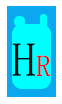
<style>
.page{position:relative;width:62px;height:104px;background:#00ffff}
.page>*{position:absolute;margin:0}
.t1{font:48px "SimSun";color:#090a09}
.t2{font:30px "SimSun";color:#fc030f}
</style>
<div class="page">
<p class="t1" style="left:12px;top:43px;width:39px;height:33px">H<span class="t2">R</span></p>
</div>
